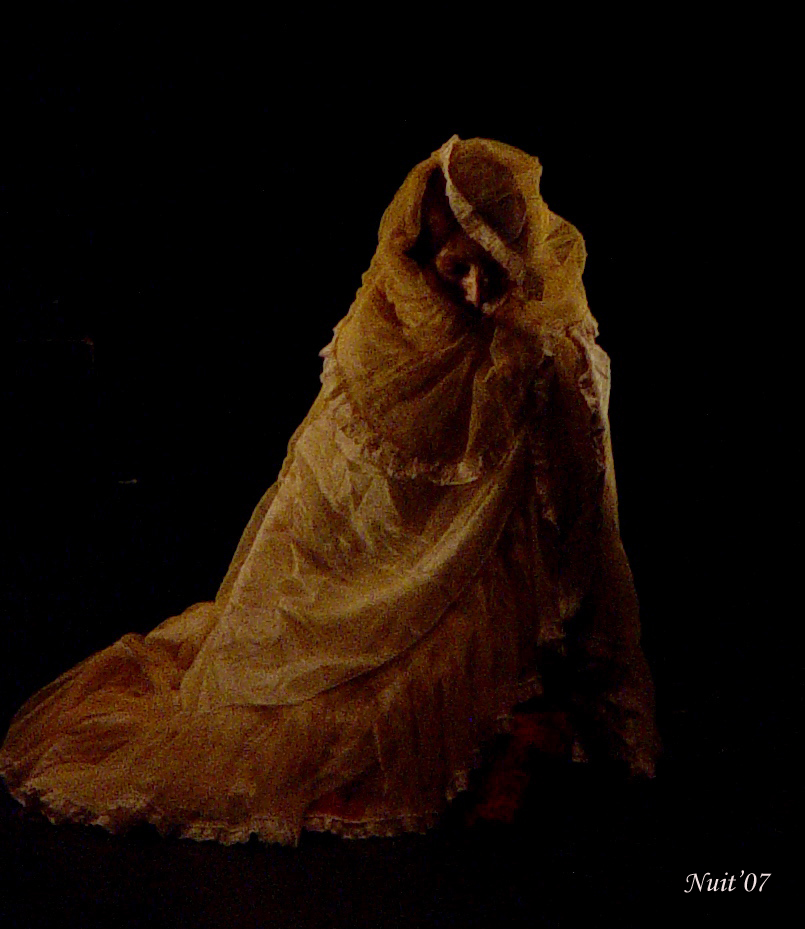
<style>
.page{position:relative;width:805px;height:929px;background:#000000}
.page>*{position:absolute;margin:0}
.t1{font:30px "MonotypeCorsiva";color:#efdfdf}
</style>
<div class="page">
<p class="t1" style="left:684px;top:870px;width:88px;height:23px">Nuit’07</p>
</div>
